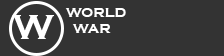
<style>
.page{position:relative;width:224px;height:56px;background:#333333}
.page>*{position:absolute;margin:0}
.t1{font:36px "CopperplateGothic-Bold";color:#ffffff}
.t2{font:14px "CopperplateGothic-Bold";color:#ffffff}
</style>
<div class="page">
<p class="t1" style="left:12px;top:15px;width:42px;height:24px">W</p>
<p class="t2" style="left:65px;top:8px;width:61px;height:25px">WORLD<br>  WAR</p>
</div>
